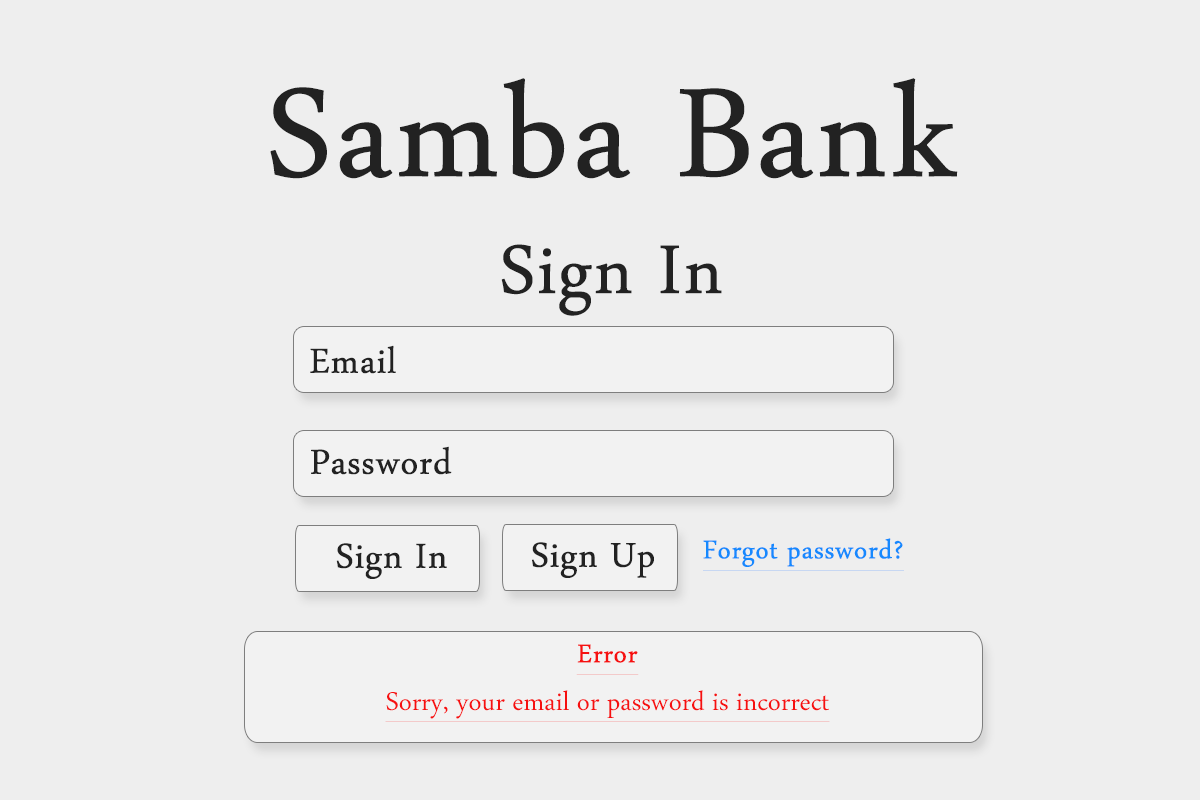
<style>
.page{position:relative;width:1200px;height:800px;background:#eeeeee}
.page>*{position:absolute;margin:0}
.t1{font:183.3px "ArabicTypesetting";color:#222222;font-weight:bold}
.t2{font:100px "ArabicTypesetting";color:#222222;font-weight:bold}
.t3{font:50px "ArabicTypesetting";color:#222222;font-weight:bold}
.t4{font:37.5px "ArabicTypesetting";color:#1689fe;font-weight:bold;text-decoration:underline}
.t5{font:37.5px "ArabicTypesetting";color:#f61010;text-decoration:underline}
.t6{font:37.5px "ArabicTypesetting";color:#f61010;font-weight:bold;text-decoration:underline}
</style>
<div class="page">
<p class="t1" style="left:270px;top:78px;width:688px;height:101px">Samba Bank</p>
<p class="t2" style="left:501px;top:244px;width:221px;height:72px">Sign In</p>
<p class="t3" style="left:310px;top:345px;width:86px;height:29px">Email</p>
<p class="t3" style="left:311px;top:446px;width:141px;height:29px">Password</p>
<p class="t3" style="left:336px;top:543px;width:111px;height:36px">Sign In</p>
<p class="t3" style="left:532px;top:542px;width:122px;height:36px">Sign Up</p>
<p class="t4" style="left:703px;top:538px;width:201px;height:33px">Forgot password?</p>
<p class="t5" style="left:385px;top:644px;width:445px;height:78px;text-align:center"><span class="t6">Error<br></span>Sorry, your email or password is incorrect</p>
</div>
